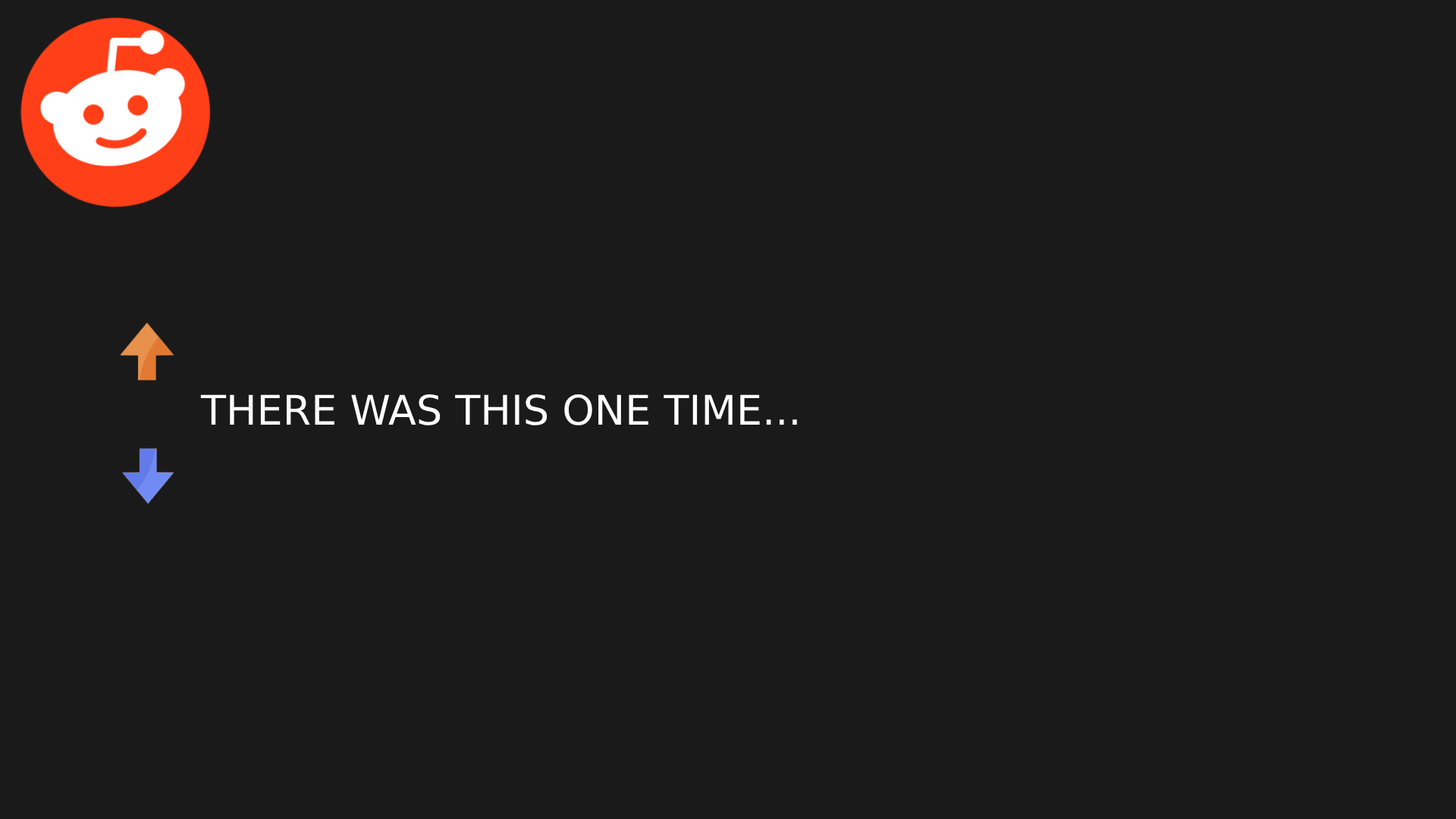
<style>
.page{position:relative;width:1456px;height:819px;background:#1a1a1a}
.page>*{position:absolute;margin:0}
.t1{font:40.9px "DejaVuSans";color:#ffffff}
</style>
<div class="page">
<p class="t1" style="left:200px;top:394px;width:597px;height:31px">THERE WAS THIS ONE TIME...</p>
</div>
